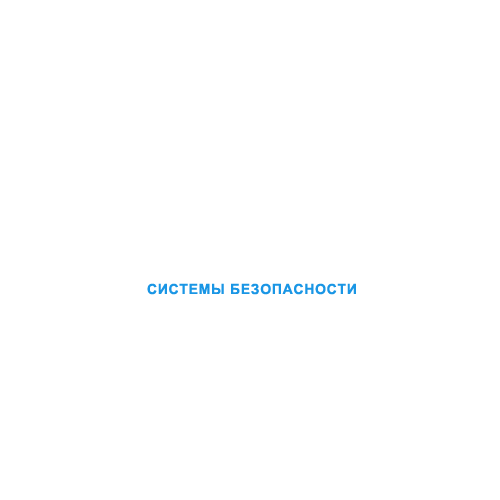
<style>
.page{position:relative;width:500px;height:500px;background:#ffffff}
.page>*{position:absolute;margin:0}
.t1{font:14px "Arial-BoldMT";letter-spacing:0.05em;color:#1a96e5}
</style>
<div class="page">
<p class="t1" style="left:147px;top:283px;width:209px;height:12px">СИСТЕМЫ БЕЗОПАСНОСТИ</p>
</div>
